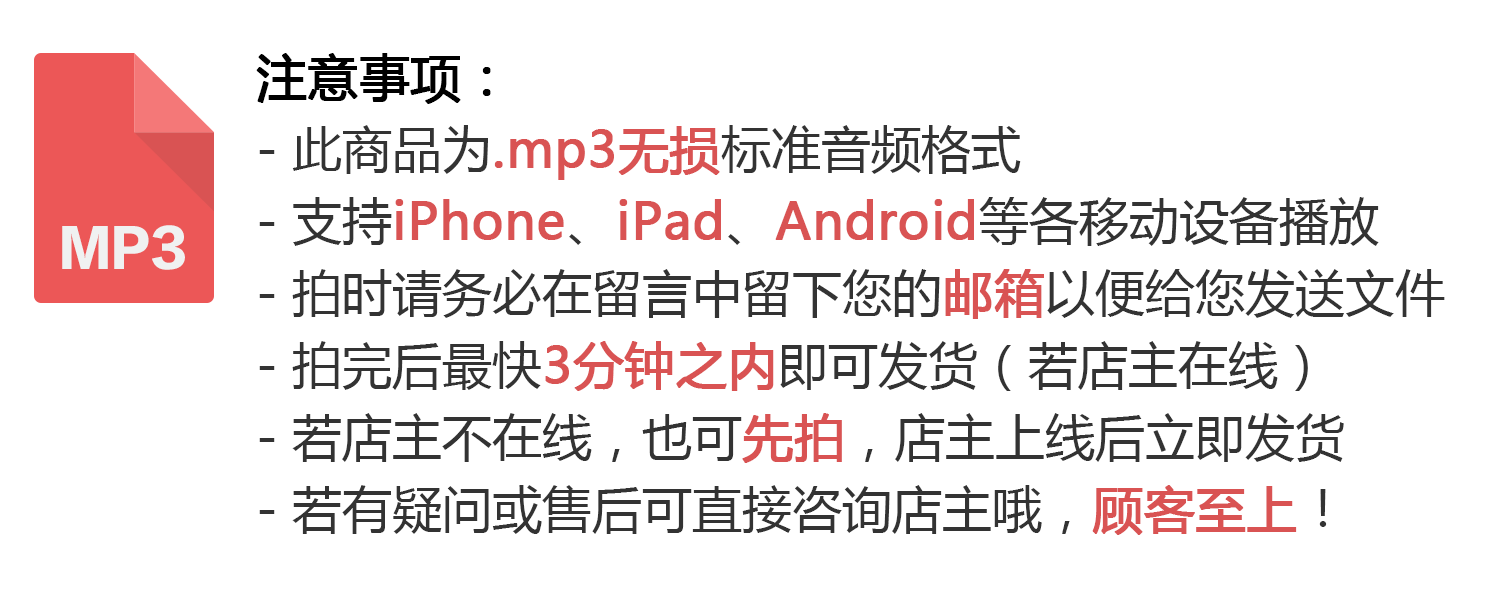
<style>
.page{position:relative;width:1500px;height:600px;background:#ffffff}
.page>*{position:absolute;margin:0}
.t1{font:50px/72px "MicrosoftYaHei";color:#333333}
.t2{font:50px/72px "MicrosoftYaHei";color:#000000;font-weight:bold}
.t3{font:50px/72px "MicrosoftYaHei";color:#d95353;font-weight:bold}
.t4{font:50px "FZLTTHK--GBK1-0";color:#f0f1f1}
</style>
<div class="page">
<p class="t1" style="left:256px;top:53px;width:1189px;height:482px"><span class="t2">注意事项：<br></span>- 此商品为<span class="t3">.mp3无损</span>标准音频格式<br>- 支持<span class="t3">iPhone</span>、<span class="t3">iPad</span>、<span class="t3">Android</span>等各移动设备播放<br>- 拍时请务必在留言中留下您的<span class="t3">邮箱</span>以便给您发送文件<br>- 拍完后最快<span class="t3">3分钟之内</span>即可发货（若店主在线）<br>- 若店主不在线，也可<span class="t3">先拍</span>，店主上线后立即发货<br>- 若有疑问或售后可直接咨询店主哦，<span class="t3">顾客至上</span>！</p>
<p class="t4" style="left:62px;top:225px;width:123px;height:45px">MP3</p>
</div>
